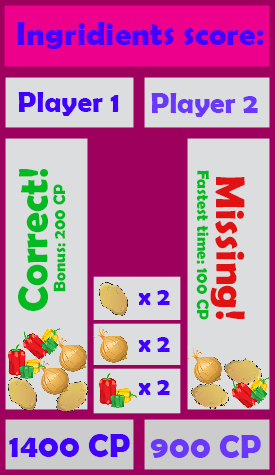
<style>
.page{position:relative;width:275px;height:475px;background:#dcddde}
.page>*{position:absolute;margin:0}
.t1{font:33.3px "BerlinSansFBDemi-Bold";color:#4200ff}
.t2{font:29.2px "BerlinSansFBDemi-Bold";color:#4200ff}
.t3{font:29.2px "BerlinSansFBDemi-Bold";color:#6a37fd}
.t4{font:41.7px "BerlinSansFBDemi-Bold";color:#03bb21}
.t5{font:16.7px "BerlinSansFBDemi-Bold";color:#03bb21}
.t6{font:41.7px "BerlinSansFBDemi-Bold";color:#e01212}
.t7{font:25px "BerlinSansFBDemi-Bold";color:#4200ff}
.t8{font:33.3px "BerlinSansFBDemi-Bold";color:#6a37fd}
</style>
<div class="page">
<p class="t1" style="left:17px;top:22px;width:247px;height:27px">Ingridients score:</p>
<p class="t2" style="left:18px;top:92px;width:101px;height:24px">Player 1</p>
<p class="t3" style="left:151px;top:93px;width:107px;height:24px">Player 2</p>
<p class="t4" style="left:18px;top:169px;width:30px;height:142px;rotate:-90deg">Correct!</p>
<p class="t5" style="left:196px;top:170px;width:13px;height:150px;rotate:90deg">Fastest time: 100 CP</p>
<p class="t5" style="left:53px;top:184px;width:13px;height:108px;rotate:-90deg">Bonus: 200 CP</p>
<p class="t6" style="left:210px;top:177px;width:35px;height:142px;rotate:90deg">Missing!</p>
<p class="t7" style="left:138px;top:290px;width:32px;height:15px">x 2</p>
<p class="t7" style="left:138px;top:337px;width:32px;height:15px">x 2</p>
<p class="t7" style="left:138px;top:380px;width:32px;height:15px">x 2</p>
<p class="t1" style="left:9px;top:434px;width:121px;height:23px">1400 CP</p>
<p class="t8" style="left:150px;top:435px;width:111px;height:23px">900 CP</p>
</div>
